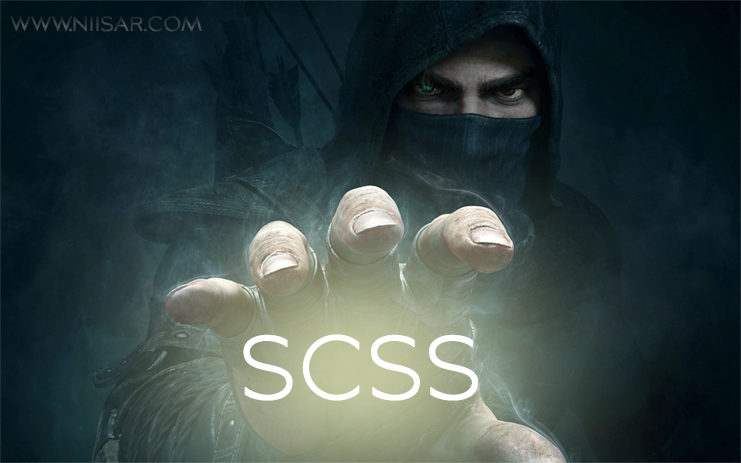
<style>
.page{position:relative;width:741px;height:463px}
.page>*{position:absolute;margin:0}
.t1{font:27.7px "AvianoSansLight";color:#373f41;font-weight:bold;scale:0.76 1}
.t2{font:109px "AvianoSansLight";color:#ffffff;font-weight:bold;scale:0.76 1}
</style>
<div class="page">
<p class="t1" style="left:10px;top:16px;width:192px;height:16px">www.niisar.com</p>
<p class="t2" style="left:243px;top:334px;width:236px;height:67px">SCSS</p>
</div>
